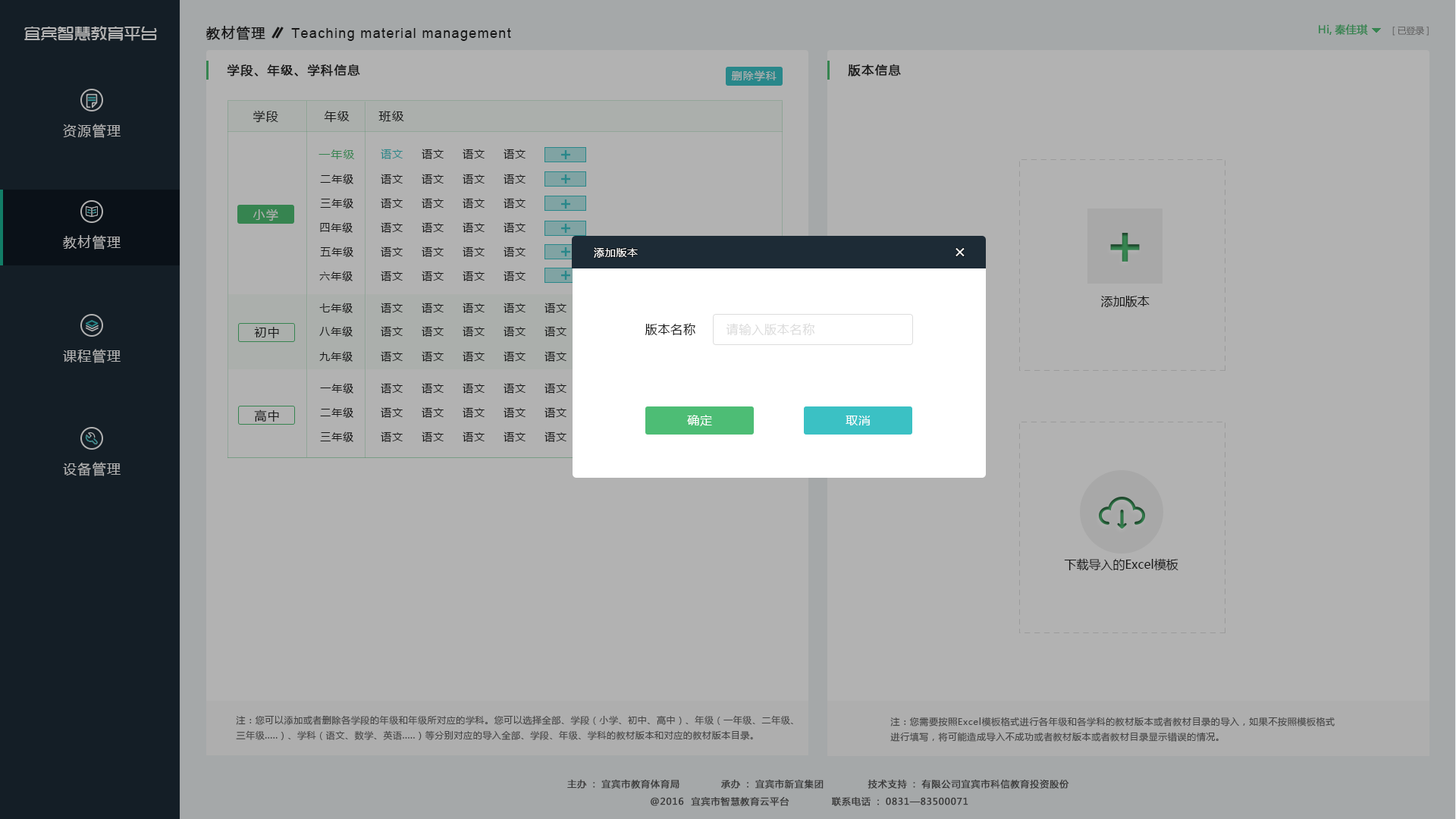
<style>
.page{position:relative;width:1456px;height:819px;background:#b2b2b2}
.page>*{position:absolute;margin:0}
.t1{font:16.7px "TRENDS";color:#b2b2b2}
.t2{font:13.6px "MicrosoftYaHei";letter-spacing:0.075em;color:#222222;font-weight:bold}
.t3{font:13.6px "ArialMT";letter-spacing:0.075em;color:#222222}
.t4{font:10.6px "MicrosoftYaHei";color:#368450;font-weight:bold}
.t5{font:9.1px "MicrosoftYaHei";letter-spacing:-0.01em;color:#5e5e5e}
.t6{font:12.1px "MicrosoftYaHei";letter-spacing:0.075em;color:#222222;font-weight:bold}
.t7{font:10.6px "MicrosoftYaHei";letter-spacing:0.075em;color:#b2b2b2}
.t8{font:12.1px "MicrosoftYaHei";letter-spacing:0.075em;color:#222222}
.t9{font:13.6px "MicrosoftYaHei";letter-spacing:0.075em;color:#b2b2b2}
.t10{font:11.4px "MicrosoftYaHei";letter-spacing:0.075em;color:#368450}
.t11{font:10.6px "MicrosoftYaHei";letter-spacing:0.075em;color:#29878a}
.t12{font:10.6px "MicrosoftYaHei";letter-spacing:0.075em;color:#222222}
.t13{font:12.1px "MicrosoftYaHei";letter-spacing:0.075em;color:#b2b2b2}
.t14{font:10.6px "MicrosoftYaHei";letter-spacing:0.05em;color:#ffffff}
.t15{font:18.2px "MicrosoftYaHei";letter-spacing:0.05em;color:#ffffff}
.t16{font:12.1px "MicrosoftYaHei";color:#222222}
.t17{font:12.1px "MicrosoftYaHei";letter-spacing:0.05em;color:#222222}
.t18{font:12.1px "MicrosoftYaHei";letter-spacing:0.05em;color:#dcdcdc}
.t19{font:12.1px "MicrosoftYaHei";letter-spacing:0.05em;color:#ffffff}
.t20{font:9.1px/15.2px "MicrosoftYaHei";letter-spacing:0.05em;color:#464646}
.t21{font:9.1px "MicrosoftYaHei";letter-spacing:0.05em;color:#3b3b3b;font-weight:bold}
</style>
<div class="page">
<p class="t1" style="left:24px;top:26px;width:133px;height:15px">宜宾智慧教育平台</p>
<p class="t2" style="left:206px;top:26px;width:59px;height:14px">教材管理</p>
<p class="t3" style="left:291px;top:28px;width:220px;height:13px">Teaching material management</p>
<p class="t4" style="left:1319px;top:24px;width:49px;height:11px">Hi,秦佳琪</p>
<p class="t5" style="left:1392px;top:26px;width:37px;height:10px">[已登录]</p>
<p class="t6" style="left:227px;top:64px;width:133px;height:13px">学段、年级、学科信息</p>
<p class="t6" style="left:848px;top:64px;width:53px;height:13px">版本信息</p>
<p class="t7" style="left:731px;top:71px;width:46px;height:10px">删除学科</p>
<p class="t8" style="left:253px;top:110px;width:25px;height:13px">学段</p>
<p class="t8" style="left:324px;top:111px;width:26px;height:11px">年级</p>
<p class="t8" style="left:378px;top:111px;width:26px;height:11px">班级</p>
<p class="t9" style="left:63px;top:124px;width:58px;height:14px">资源管理</p>
<p class="t10" style="left:318px;top:149px;width:37px;height:10px">一年级</p>
<p class="t11" style="left:381px;top:149px;width:22px;height:10px">语文</p>
<p class="t12" style="left:422px;top:149px;width:22px;height:10px">语文</p>
<p class="t12" style="left:463px;top:149px;width:22px;height:10px">语文</p>
<p class="t12" style="left:504px;top:149px;width:22px;height:10px">语文</p>
<p class="t12" style="left:320px;top:174px;width:33px;height:10px">二年级</p>
<p class="t12" style="left:381px;top:174px;width:22px;height:10px">语文</p>
<p class="t12" style="left:422px;top:174px;width:22px;height:10px">语文</p>
<p class="t12" style="left:463px;top:174px;width:22px;height:10px">语文</p>
<p class="t12" style="left:504px;top:174px;width:22px;height:10px">语文</p>
<p class="t12" style="left:320px;top:198px;width:33px;height:11px">三年级</p>
<p class="t12" style="left:381px;top:198px;width:22px;height:11px">语文</p>
<p class="t12" style="left:422px;top:198px;width:22px;height:11px">语文</p>
<p class="t12" style="left:463px;top:198px;width:22px;height:11px">语文</p>
<p class="t12" style="left:504px;top:198px;width:22px;height:11px">语文</p>
<p class="t13" style="left:253px;top:209px;width:25px;height:12px">小学</p>
<p class="t12" style="left:320px;top:222px;width:33px;height:11px">四年级</p>
<p class="t12" style="left:381px;top:222px;width:22px;height:11px">语文</p>
<p class="t12" style="left:422px;top:222px;width:22px;height:11px">语文</p>
<p class="t12" style="left:463px;top:222px;width:22px;height:11px">语文</p>
<p class="t12" style="left:504px;top:222px;width:22px;height:11px">语文</p>
<p class="t9" style="left:63px;top:235px;width:58px;height:14px">教材管理</p>
<p class="t12" style="left:320px;top:246px;width:33px;height:11px">五年级</p>
<p class="t12" style="left:381px;top:246px;width:22px;height:11px">语文</p>
<p class="t12" style="left:422px;top:246px;width:22px;height:11px">语文</p>
<p class="t12" style="left:463px;top:246px;width:22px;height:11px">语文</p>
<p class="t12" style="left:504px;top:246px;width:22px;height:11px">语文</p>
<p class="t14" style="left:594px;top:247px;width:44px;height:11px">添加版本</p>
<p class="t15" style="left:955px;top:248px;width:10px;height:8px">×</p>
<p class="t12" style="left:319px;top:271px;width:34px;height:10px">六年级</p>
<p class="t12" style="left:381px;top:271px;width:22px;height:10px">语文</p>
<p class="t12" style="left:422px;top:271px;width:22px;height:10px">语文</p>
<p class="t12" style="left:463px;top:271px;width:22px;height:10px">语文</p>
<p class="t12" style="left:504px;top:271px;width:22px;height:10px">语文</p>
<p class="t12" style="left:319px;top:303px;width:34px;height:10px">七年级</p>
<p class="t12" style="left:381px;top:303px;width:22px;height:10px">语文</p>
<p class="t12" style="left:422px;top:303px;width:22px;height:10px">语文</p>
<p class="t12" style="left:463px;top:303px;width:22px;height:10px">语文</p>
<p class="t12" style="left:504px;top:303px;width:22px;height:10px">语文</p>
<p class="t12" style="left:544px;top:303px;width:22px;height:10px">语文</p>
<p class="t16" style="left:1101px;top:296px;width:49px;height:11px">添加版本</p>
<p class="t8" style="left:254px;top:327px;width:25px;height:11px">初中</p>
<p class="t12" style="left:319px;top:326px;width:34px;height:11px">八年级</p>
<p class="t12" style="left:381px;top:326px;width:22px;height:11px">语文</p>
<p class="t12" style="left:422px;top:326px;width:22px;height:11px">语文</p>
<p class="t12" style="left:463px;top:326px;width:22px;height:11px">语文</p>
<p class="t12" style="left:504px;top:326px;width:22px;height:11px">语文</p>
<p class="t12" style="left:544px;top:326px;width:22px;height:11px">语文</p>
<p class="t17" style="left:645px;top:323px;width:50px;height:12px">版本名称</p>
<p class="t18" style="left:726px;top:323px;width:89px;height:12px">请输入版本名称</p>
<p class="t9" style="left:63px;top:349px;width:58px;height:14px">课程管理</p>
<p class="t12" style="left:319px;top:351px;width:34px;height:11px">九年级</p>
<p class="t12" style="left:381px;top:351px;width:22px;height:11px">语文</p>
<p class="t12" style="left:422px;top:351px;width:22px;height:11px">语文</p>
<p class="t12" style="left:463px;top:351px;width:22px;height:11px">语文</p>
<p class="t12" style="left:504px;top:351px;width:22px;height:11px">语文</p>
<p class="t12" style="left:544px;top:351px;width:22px;height:11px">语文</p>
<p class="t12" style="left:320px;top:383px;width:33px;height:11px">一年级</p>
<p class="t12" style="left:381px;top:383px;width:22px;height:11px">语文</p>
<p class="t12" style="left:422px;top:383px;width:22px;height:11px">语文</p>
<p class="t12" style="left:463px;top:383px;width:22px;height:11px">语文</p>
<p class="t12" style="left:504px;top:383px;width:22px;height:11px">语文</p>
<p class="t12" style="left:544px;top:383px;width:22px;height:11px">语文</p>
<p class="t8" style="left:254px;top:409px;width:25px;height:13px">高中</p>
<p class="t12" style="left:320px;top:407px;width:33px;height:11px">二年级</p>
<p class="t12" style="left:381px;top:407px;width:22px;height:11px">语文</p>
<p class="t12" style="left:422px;top:407px;width:22px;height:11px">语文</p>
<p class="t12" style="left:463px;top:407px;width:22px;height:11px">语文</p>
<p class="t12" style="left:504px;top:407px;width:22px;height:11px">语文</p>
<p class="t12" style="left:544px;top:407px;width:22px;height:11px">语文</p>
<p class="t19" style="left:687px;top:415px;width:25px;height:11px">确定</p>
<p class="t19" style="left:846px;top:416px;width:24px;height:9px">取消</p>
<p class="t12" style="left:320px;top:431px;width:33px;height:11px">三年级</p>
<p class="t12" style="left:381px;top:431px;width:22px;height:11px">语文</p>
<p class="t12" style="left:422px;top:431px;width:22px;height:11px">语文</p>
<p class="t12" style="left:463px;top:431px;width:22px;height:11px">语文</p>
<p class="t12" style="left:504px;top:431px;width:22px;height:11px">语文</p>
<p class="t12" style="left:544px;top:431px;width:22px;height:11px">语文</p>
<p class="t9" style="left:63px;top:462px;width:58px;height:14px">设备管理</p>
<p class="t16" style="left:1064px;top:558px;width:114px;height:13px">下载导入的Excel模板</p>
<p class="t20" style="left:236px;top:715px;width:557px;height:25px">注：您可以添加或者删除各学段的年级和年级所对应的学科。您可以选择全部、学段（小学、初中、高中）、年级（一年级、二年级、<br>三年级.....）、学科（语文、数学、英语.....）等分别对应的导入全部、学段、年级、学科的教材版本和对应的教材版本目录。</p>
<p class="t20" style="left:890px;top:717px;width:445px;height:25px">注：您需要按照Excel模板格式进行各年级和各学科的教材版本或者教材目录的导入，如果不按照模板格式<br>进行填写，将可能造成导入不成功或者教材版本或者教材目录显示错误的情况。</p>
<p class="t21" style="left:567px;top:780px;width:112px;height:9px">主办：宜宾市教育体育局</p>
<p class="t21" style="left:721px;top:780px;width:103px;height:9px">承办：宜宾市新宜集团</p>
<p class="t21" style="left:868px;top:780px;width:201px;height:9px">技术支持：有限公司宜宾市科信教育投资股份</p>
<p class="t21" style="left:651px;top:797px;width:138px;height:9px">@2016  宜宾市智慧教育云平台</p>
<p class="t21" style="left:832px;top:797px;width:136px;height:9px">联系电话：0831—83500071</p>
</div>
